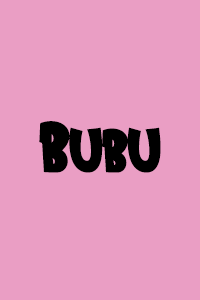
<style>
.page{position:relative;width:200px;height:300px;background:#ea9ec4}
.page>*{position:absolute;margin:0}
.t1{font:73px "SaiyanSans";color:#000000}
</style>
<div class="page">
<p class="t1" style="left:39px;top:121px;width:122px;height:52px">Bubu</p>
</div>
